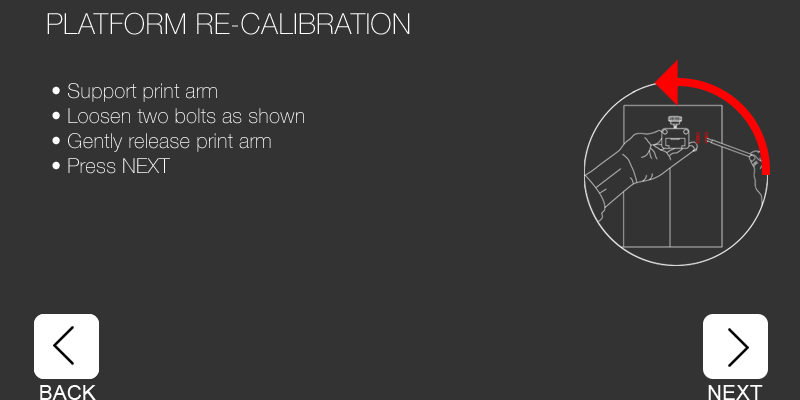
<style>
.page{position:relative;width:800px;height:400px;background:#333333}
.page>*{position:absolute;margin:0}
.t1{font:20.8px "HelveticaNeue-Thin";color:#ffffff}
</style>
<div class="page">
<p class="t1" style="left:52px;top:83px;width:252px;height:91px">• Support print arm<br>• Loosen two bolts as shown<br>• Gently release print arm<br>• Press NEXT</p>
</div>
